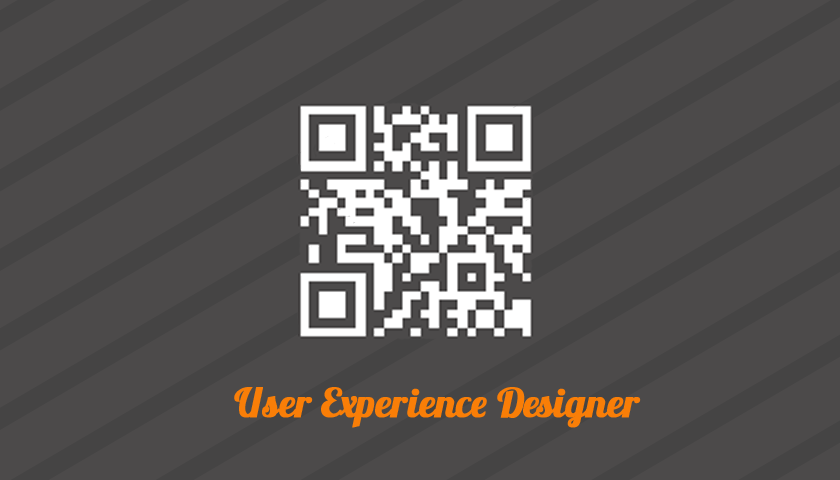
<style>
.page{position:relative;width:840px;height:480px;background:#4c4a4a}
.page>*{position:absolute;margin:0}
.t1{font:40px "Lobster1.3";color:#f97e07;font-weight:bold}
</style>
<div class="page">
<p class="t1" style="left:234px;top:387px;width:407px;height:41px">User Experience Designer</p>
</div>
